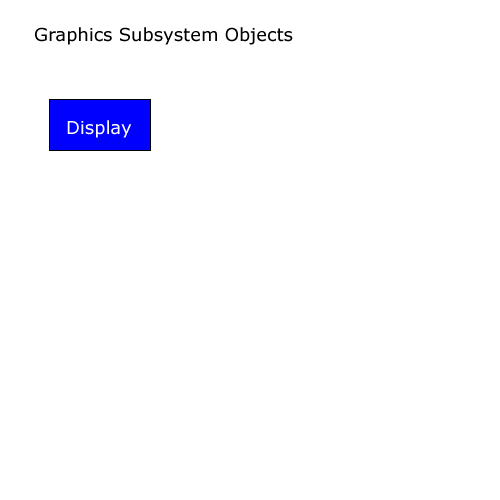
<style>
.page{position:relative;width:500px;height:500px;background:#ffffff}
.page>*{position:absolute;margin:0}
.t1{font:18px "Verdana";color:#000000}
.t2{font:18px "Verdana";color:#ffffff}
</style>
<div class="page">
<p class="t1" style="left:35px;top:27px;width:258px;height:18px">Graphics Subsystem Objects</p>
<p class="t2" style="left:67px;top:120px;width:65px;height:18px">Display</p>
</div>
